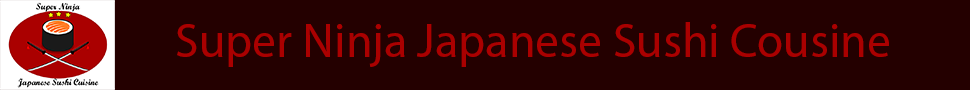
<style>
.page{position:relative;width:970px;height:90px;background:#240000}
.page>*{position:absolute;margin:0}
.t1{font:48px "MyriadPro-Regular";color:#aa0000}
</style>
<div class="page">
<p class="t1" style="left:177px;top:22px;width:712px;height:45px">Super Ninja Japanese Sushi Cousine</p>
</div>
